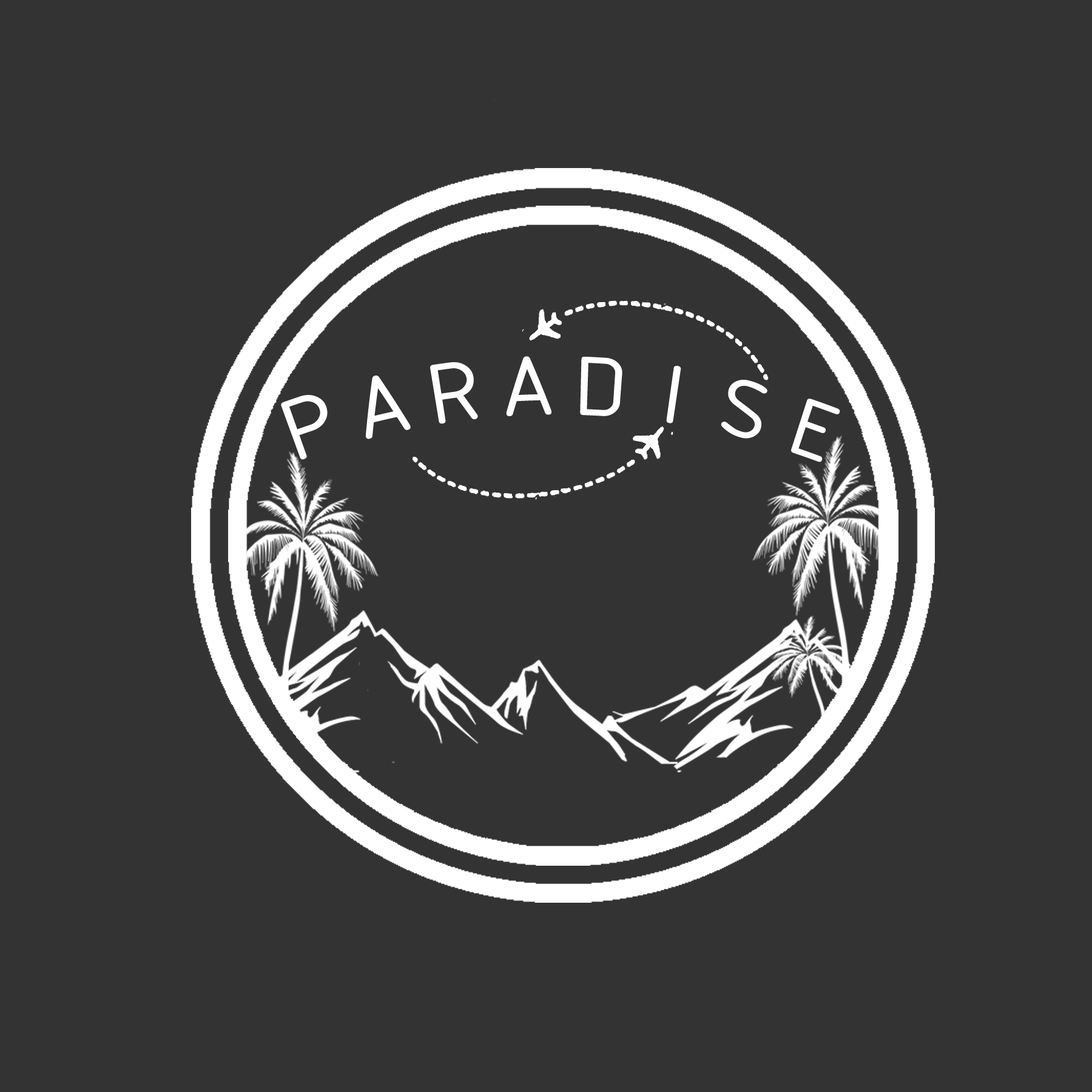
<style>
.page{position:relative;width:1092px;height:1092px;background:#333333}
.page>*{position:absolute;margin:0}
.t1{font:89.5px "ISOCTEUR";color:#ffffff}
</style>
<div class="page">
<p class="t1" style="left:281px;top:356px;width:559px;height:106px;rotate:8deg">PARADISE</p>
</div>
